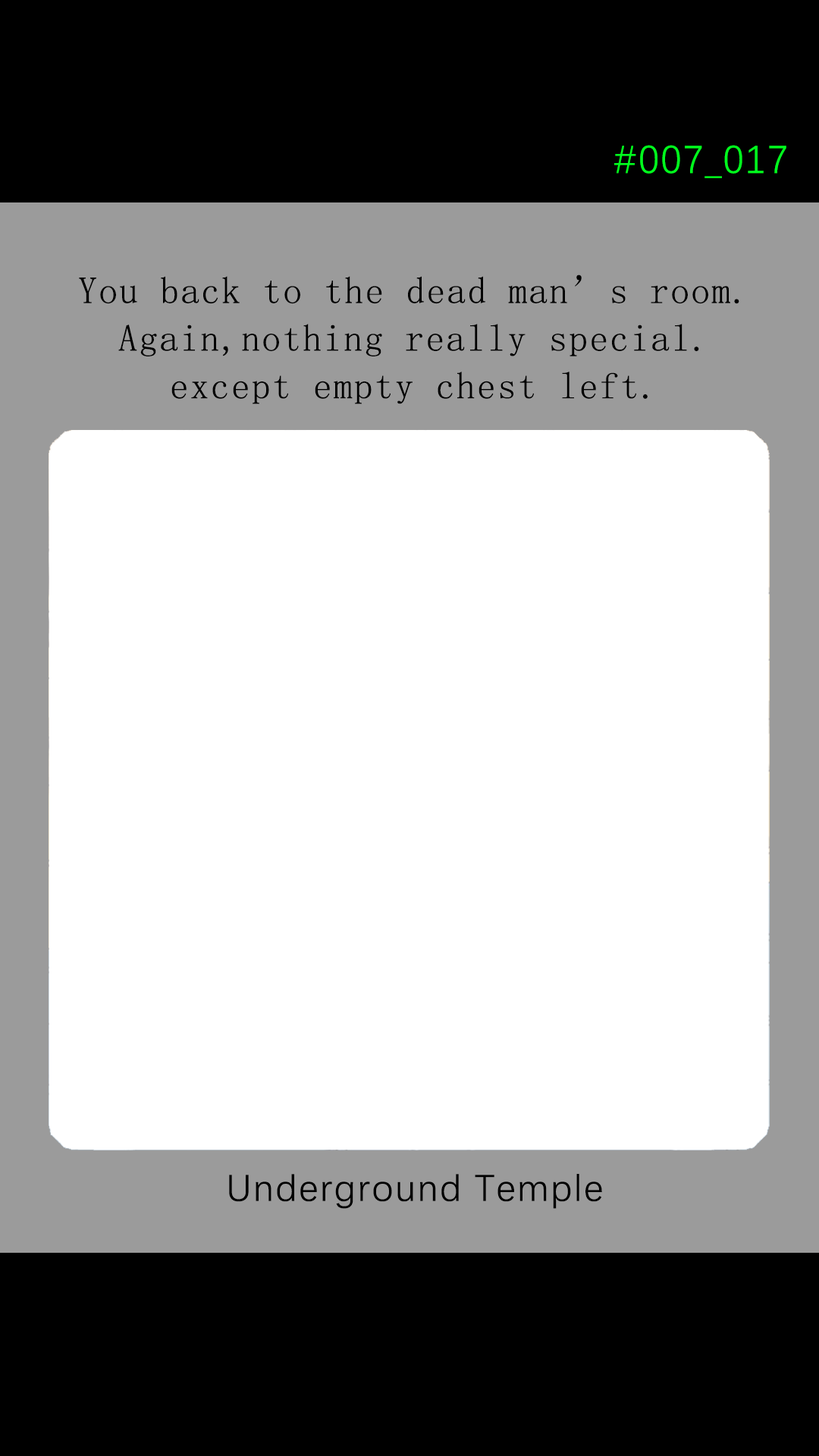
<style>
.page{position:relative;width:819px;height:1456px;background:#ffffff}
.page>*{position:absolute;margin:0}
.t1{font:39.2px "DengXian-Regular";letter-spacing:0.04em;color:#00ff1e}
.t2{font:37.9px/47.6px "SimSun";letter-spacing:0.04em;color:#000000}
.t3{font:37.9px "DengXian-Regular";letter-spacing:0.04em;color:#000000}
</style>
<div class="page">
<p class="t1" style="left:614px;top:145px;width:172px;height:33px">#007_017</p>
<p class="t2" style="left:79px;top:275px;width:660px;height:129px;text-align:center">You back to the dead man’s room.<br>Again,nothing really special.<br>except empty chest left.</p>
<p class="t3" style="left:229px;top:1174px;width:373px;height:35px">Underground Temple</p>
</div>
